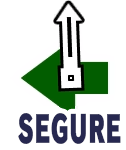
<style>
.page{position:relative;width:126px;height:150px;background:#ffffff}
.page>*{position:absolute;margin:0}
.t1{font:37.3px "RodinNTLGPro-UB";color:#272850;scale:0.62 1}
</style>
<div class="page">
<p class="t1" style="left:18px;top:113px;width:103px;height:31px">SEGURE</p>
</div>
